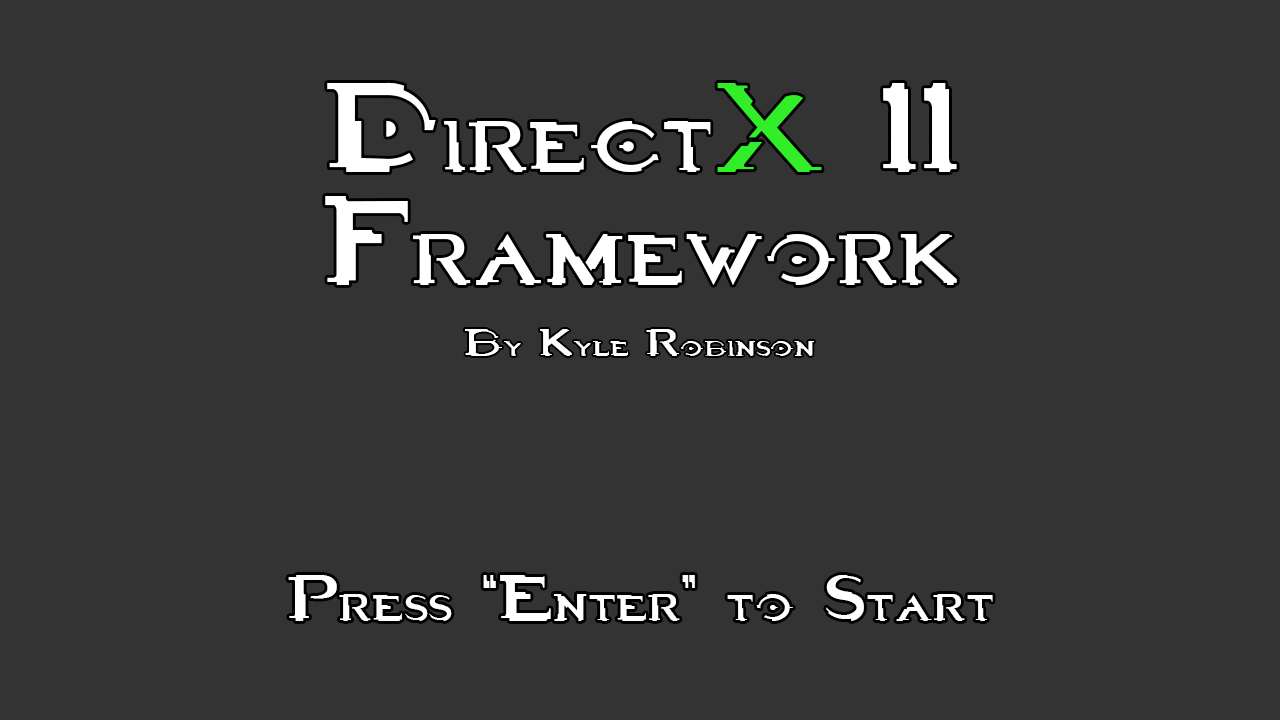
<style>
.page{position:relative;width:1280px;height:720px;background:#333333}
.page>*{position:absolute;margin:0}
.t1{font:169.3px "Halo3";color:#ffffff;scale:0.64 1}
.t2{font:169.3px "NiseSegaSonic";color:#ffffff;scale:0.64 1}
.t3{font:169.3px "Halo3";color:#31ee28;scale:0.64 1}
.t4{font:51.4px "Halo3";color:#ffffff;scale:0.68 1}
.t5{font:87.9px "Halo3";color:#ffffff;scale:0.67 1}
</style>
<div class="page">
<p class="t1" style="left:327px;top:82px;width:630px;height:90px"><span class="t2"> </span>Direct<span class="t3">X </span>11</p>
<p class="t1" style="left:325px;top:196px;width:632px;height:89px"><span class="t2"> </span>Framework</p>
<p class="t4" style="left:465px;top:329px;width:349px;height:27px">By Kyle Robinson</p>
<p class="t5" style="left:288px;top:575px;width:705px;height:46px">Press “Enter” to Start</p>
</div>
